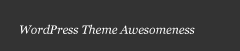
<style>
.page{position:relative;width:240px;height:51px;background:#333333}
.page>*{position:absolute;margin:0}
.t1{font:12px "Georgia-Italic";color:#ffffff}
</style>
<div class="page">
<p class="t1" style="left:20px;top:24px;width:175px;height:10px">WordPress Theme Awesomeness</p>
</div>
